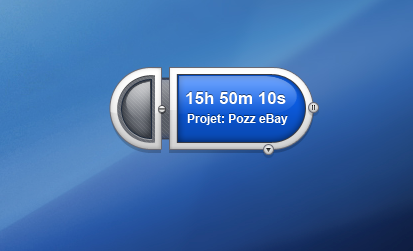
<style>
.page{position:relative;width:413px;height:251px}
.page>*{position:absolute;margin:0}
.t1{font:17px "Arial-BoldMT";color:#ffffff}
.t2{font:12px "Arial-BoldMT";color:#feffff}
</style>
<div class="page">
<p class="t1" style="left:186px;top:92px;width:100px;height:12px">15h 50m 10s</p>
<p class="t2" style="left:187px;top:114px;width:101px;height:11px">Projet: Pozz eBay</p>
</div>
